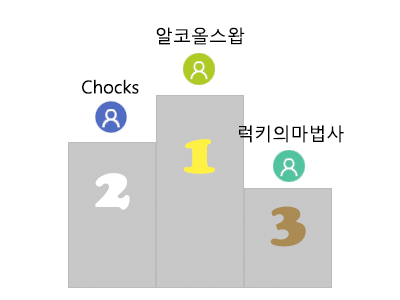
<style>
.page{position:relative;width:400px;height:300px;background:#ffffff}
.page>*{position:absolute;margin:0}
.t1{font:18px "MalgunGothic";color:#000000}
.t2{font:60px "CooperBlack";color:#fff044}
.t3{font:60px "CooperBlack";color:#ffffff}
.t4{font:60px "CooperBlack";color:#ab8b54}
</style>
<div class="page">
<p class="t1" style="left:156px;top:27px;width:89px;height:18px">알코올스왑</p>
<p class="t1" style="left:82px;top:79px;width:57px;height:15px">Chocks</p>
<p class="t1" style="left:239px;top:125px;width:105px;height:18px">럭키의마법사</p>
<p class="t2" style="left:183px;top:139px;width:32px;height:35px">1</p>
<p class="t3" style="left:95px;top:173px;width:35px;height:37px">2</p>
<p class="t4" style="left:270px;top:206px;width:36px;height:41px">3</p>
</div>
